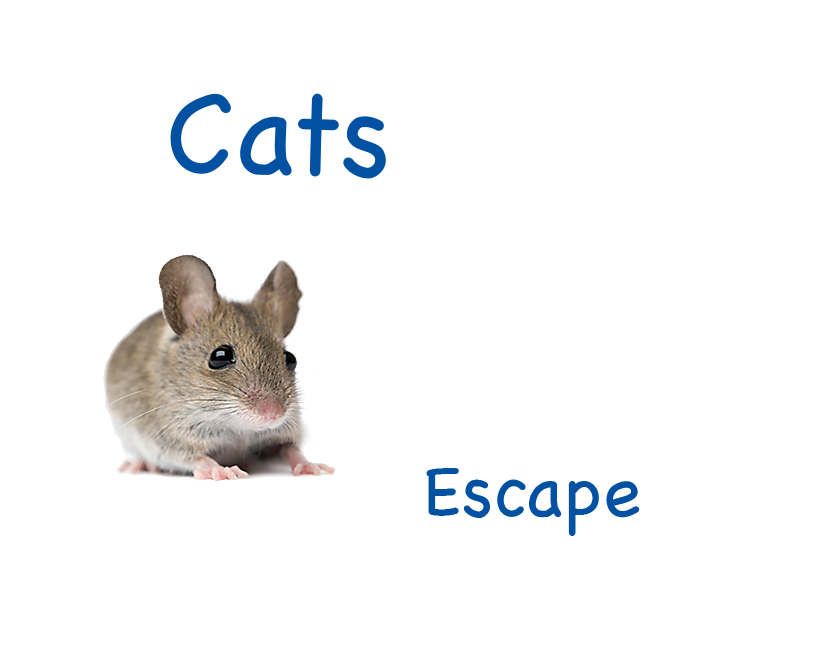
<style>
.page{position:relative;width:825px;height:665px;background:#ffffff}
.page>*{position:absolute;margin:0}
.t1{font:116.4px "Chalkboard";color:#0051a1}
.t2{font:72px "Chalkboard";color:#0051a1}
</style>
<div class="page">
<p class="t1" style="left:170px;top:93px;width:216px;height:86px;rotate:2deg">Cats</p>
<p class="t2" style="left:426px;top:468px;width:214px;height:68px">Escape</p>
</div>
